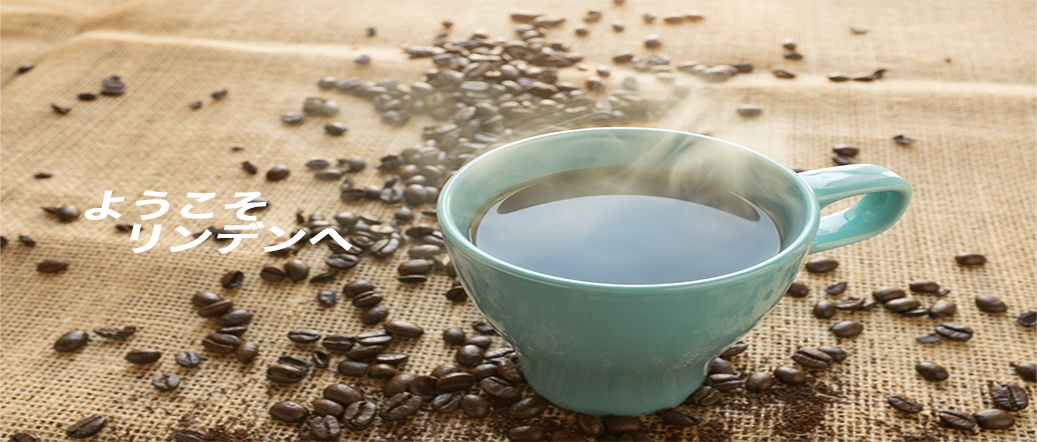
<style>
.page{position:relative;width:1037px;height:442px}
.page>*{position:absolute;margin:0}
.t1{font:33.6px/33.4px "HiraKakuPro-W6";letter-spacing:-0.005em;color:#ffffff;font-weight:bold;font-style:italic;scale:1.36 1}
</style>
<div class="page">
<p class="t1" style="left:84px;top:190px;width:268px;height:64px">ようこそ<br>  リンデンへ</p>
</div>
